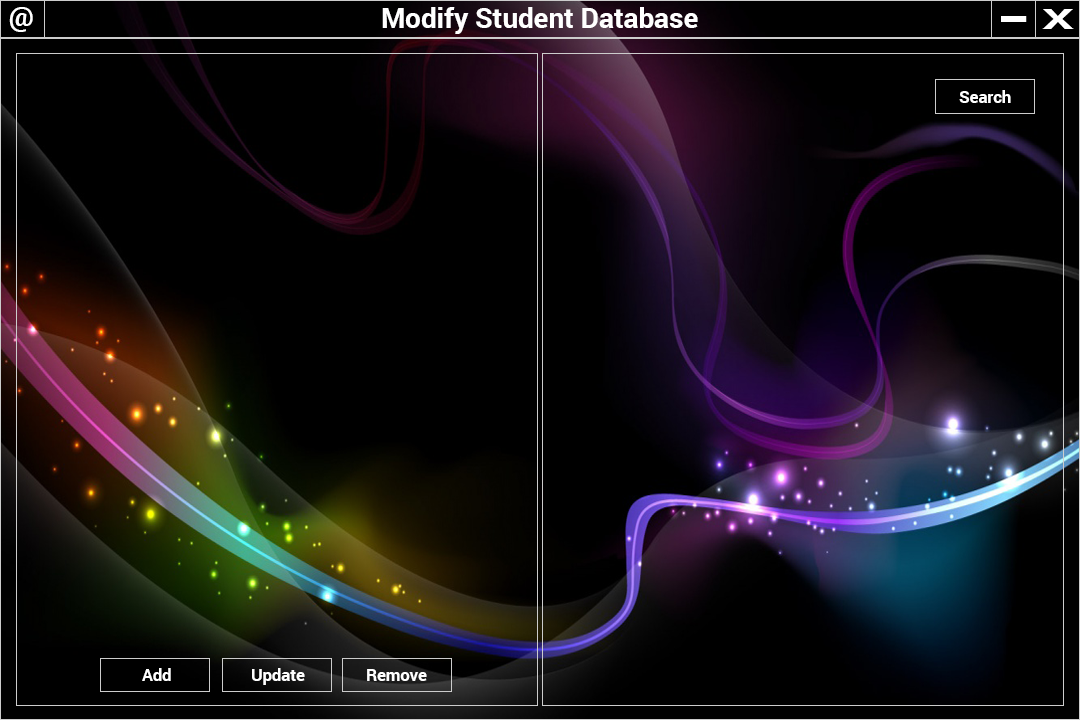
<style>
.page{position:relative;width:1080px;height:720px;background:#000000}
.page>*{position:absolute;margin:0}
.t1{font:27.8px "Roboto-Bold";color:#ffffff}
.t2{font:50px "Roboto-Bold";color:#ffffff;scale:1.81 1}
.t3{font:27.8px "Roboto-Bold";color:#ffffff;scale:1.81 1}
.t4{font:16.7px "Roboto-Bold";color:#ffffff}
</style>
<div class="page">
<p class="t1" style="left:9px;top:7px;width:24px;height:25px">@</p>
<p class="t1" style="left:382px;top:7px;width:316px;height:27px">Modify Student Database</p>
<p class="t2" style="left:1001px;top:16px;width:26px;height:6px">-</p>
<p class="t3" style="left:1042px;top:9px;width:32px;height:20px">X</p>
<p class="t4" style="left:959px;top:90px;width:52px;height:13px">Search</p>
<p class="t4" style="left:142px;top:668px;width:29px;height:13px">Add</p>
<p class="t4" style="left:252px;top:668px;width:53px;height:17px">Update</p>
<p class="t4" style="left:367px;top:669px;width:60px;height:12px">Remove</p>
</div>
